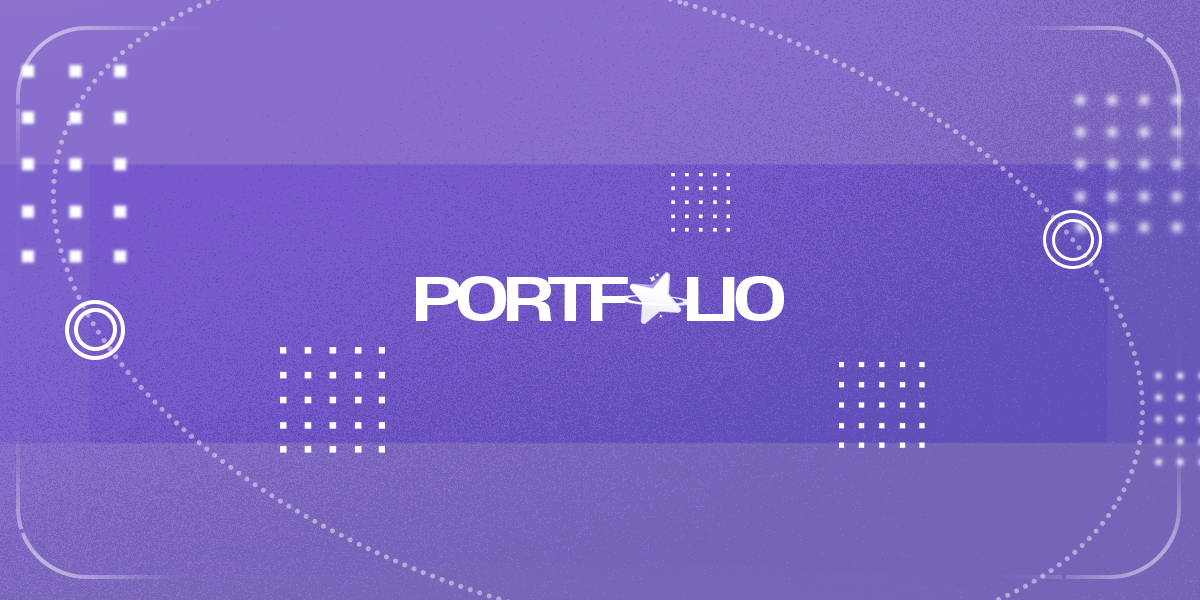
<style>
.page{position:relative;width:1200px;height:600px;background:#896ecd}
.page>*{position:absolute;margin:0}
.t1{font:55.8px "S-CoreDream-6Bold";letter-spacing:-0.1em;color:#ffffff;text-transform:uppercase;scale:1.38 1}
</style>
<div class="page">
<p class="t1" style="left:416px;top:276px;width:368px;height:45px">portf    lio</p>
</div>
